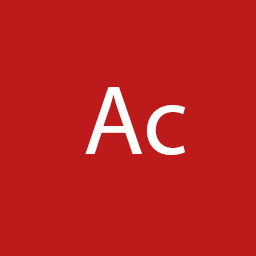
<style>
.page{position:relative;width:256px;height:256px;background:#bd1b1b}
.page>*{position:absolute;margin:0}
.t1{font:100px "MyriadPro-Regular";color:#ffffff}
</style>
<div class="page">
<p class="t1" style="left:85px;top:87px;width:100px;height:68px">Ac</p>
</div>
